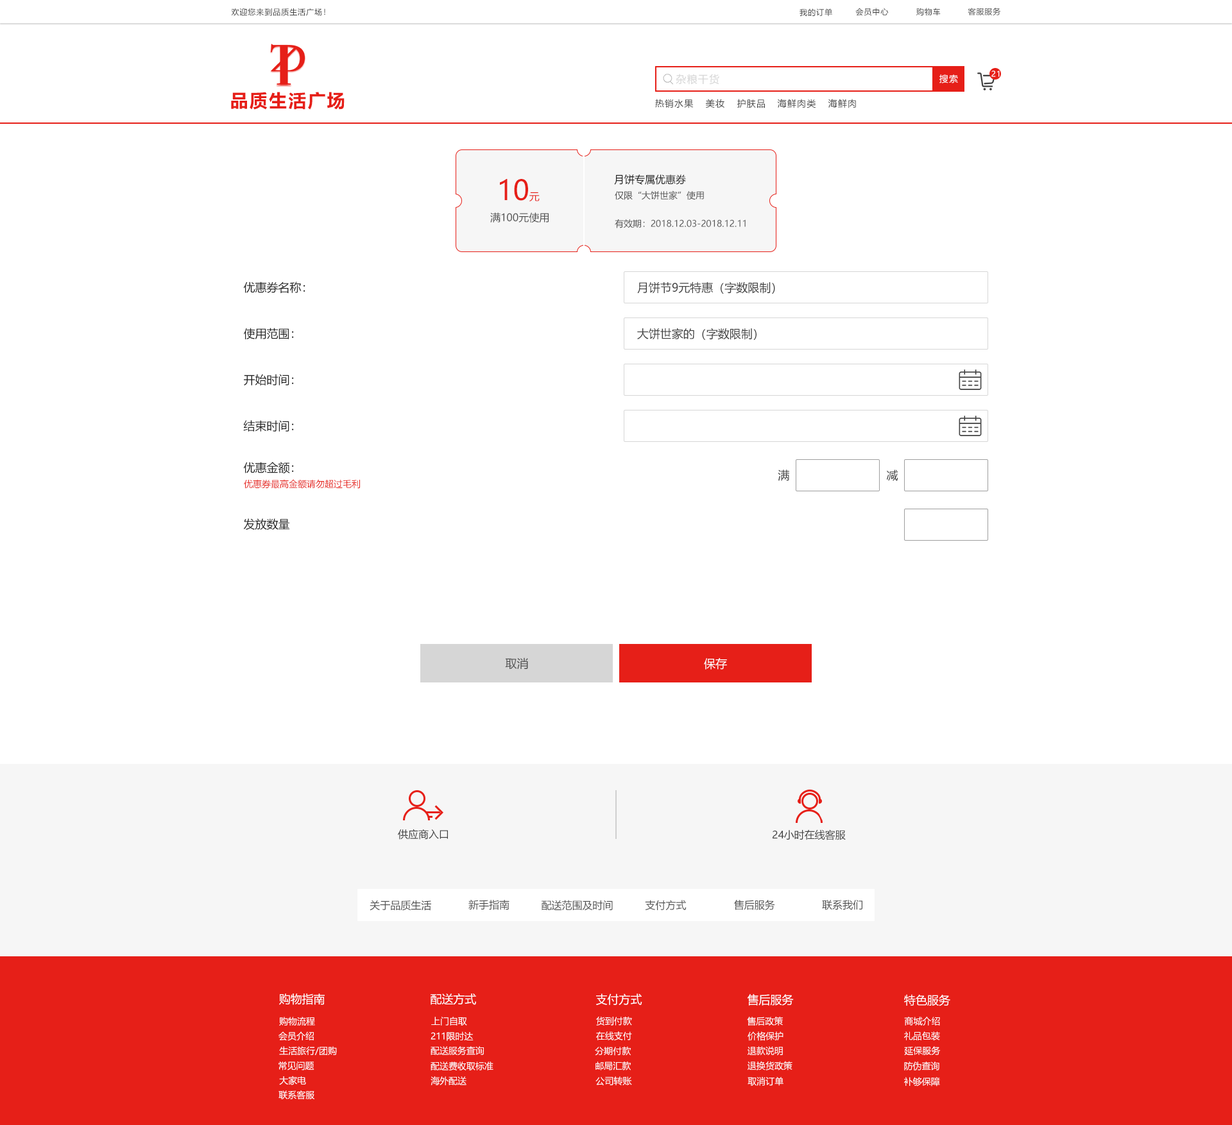
<style>
.page{position:relative;width:1232px;height:1125px;background:#ffffff}
.page>*{position:absolute;margin:0}
.t1{font:7.7px "MicrosoftYaHei";letter-spacing:0.08em;color:#404040}
.t2{font:10.3px "MicrosoftYaHei";letter-spacing:0.08em;color:#d6d6d6}
.t3{font:9px "MicrosoftYaHei";letter-spacing:0.08em;color:#ffffff}
.t4{font:7.7px "MicrosoftYaHei";letter-spacing:0.08em;color:#ffffff}
.t5{font:18px "MicrosoftYaHei-Bold";letter-spacing:0.08em;color:#e61f18}
.t6{font:9px "MicrosoftYaHei";letter-spacing:0.08em;color:#404040}
.t7{font:27.6px "MicrosoftYaHei";color:#e61f18}
.t8{font:10.3px "MicrosoftYaHei";color:#e61f18}
.t9{font:10.3px "MicrosoftYaHei";color:#202020}
.t10{font:9px "MicrosoftYaHei";color:#505050}
.t11{font:10.3px "MicrosoftYaHei";color:#505050}
.t12{font:11.5px "MicrosoftYaHei";color:#202020}
.t13{font:11.5px "MicrosoftYaHei";color:#404040}
.t14{font:9px "MicrosoftYaHei";color:#e61f18}
.t15{font:11.5px "MicrosoftYaHei";color:#505050}
.t16{font:11.5px "MicrosoftYaHei";color:#ffffff}
.t17{font:10.3px "MicrosoftYaHei";color:#404040}
.t18{font:9px "MicrosoftYaHei";color:#ffffff}
</style>
<div class="page">
<p class="t1" style="left:231px;top:8px;width:94px;height:8px">欢迎您来到品质生活广场！</p>
<p class="t1" style="left:799px;top:8px;width:33px;height:8px">我的订单</p>
<p class="t1" style="left:855px;top:8px;width:34px;height:8px">会员中心</p>
<p class="t1" style="left:916px;top:8px;width:25px;height:8px">购物车</p>
<p class="t1" style="left:968px;top:8px;width:33px;height:7px">客服服务</p>
<p class="t2" style="left:676px;top:74px;width:43px;height:11px">杂粮干货</p>
<p class="t3" style="left:939px;top:74px;width:19px;height:9px">搜索</p>
<p class="t4" style="left:991px;top:71px;width:9px;height:6px">21</p>
<p class="t5" style="left:231px;top:92px;width:114px;height:18px">品质生活广场</p>
<p class="t6" style="left:655px;top:99px;width:39px;height:9px">热销水果</p>
<p class="t6" style="left:706px;top:99px;width:18px;height:9px">美妆</p>
<p class="t6" style="left:737px;top:99px;width:28px;height:9px">护肤品</p>
<p class="t6" style="left:777px;top:99px;width:39px;height:9px">海鲜肉类</p>
<p class="t6" style="left:828px;top:99px;width:28px;height:9px">海鲜肉</p>
<p class="t7" style="left:500px;top:179px;width:40px;height:22px">10<span class="t8">元</span></p>
<p class="t9" style="left:614px;top:175px;width:72px;height:10px">月饼专属优惠券</p>
<p class="t10" style="left:615px;top:191px;width:89px;height:9px">仅限“大饼世家”使用</p>
<p class="t11" style="left:490px;top:212px;width:59px;height:11px">满100元使用</p>
<p class="t10" style="left:615px;top:219px;width:131px;height:9px">有效期：2018.12.03-2018.12.11</p>
<p class="t12" style="left:243px;top:282px;width:62px;height:11px">优惠券名称：</p>
<p class="t13" style="left:637px;top:282px;width:138px;height:12px">月饼节9元特惠（字数限制）</p>
<p class="t12" style="left:244px;top:328px;width:50px;height:11px">使用范围：</p>
<p class="t13" style="left:637px;top:328px;width:119px;height:12px">大饼世家的（字数限制）</p>
<p class="t12" style="left:244px;top:374px;width:50px;height:12px">开始时间：</p>
<p class="t12" style="left:243px;top:420px;width:51px;height:12px">结束时间：</p>
<p class="t12" style="left:243px;top:462px;width:51px;height:12px">优惠金额：</p>
<p class="t13" style="left:778px;top:470px;width:11px;height:11px">满</p>
<p class="t13" style="left:886px;top:470px;width:12px;height:11px">减</p>
<p class="t14" style="left:244px;top:479px;width:116px;height:10px">优惠券最高金额请勿超过毛利</p>
<p class="t12" style="left:243px;top:518px;width:47px;height:12px">发放数量</p>
<p class="t15" style="left:505px;top:658px;width:23px;height:11px">取消</p>
<p class="t16" style="left:704px;top:658px;width:23px;height:12px">保存</p>
<p class="t17" style="left:398px;top:829px;width:50px;height:11px">供应商入口</p>
<p class="t17" style="left:772px;top:830px;width:74px;height:11px">24小时在线客服</p>
<p class="t11" style="left:370px;top:900px;width:61px;height:11px">关于品质生活</p>
<p class="t11" style="left:468px;top:900px;width:41px;height:10px">新手指南</p>
<p class="t11" style="left:542px;top:900px;width:71px;height:11px">配送范围及时间</p>
<p class="t11" style="left:645px;top:900px;width:42px;height:10px">支付方式</p>
<p class="t11" style="left:734px;top:900px;width:41px;height:10px">售后服务</p>
<p class="t11" style="left:822px;top:900px;width:40px;height:10px">联系我们</p>
<p class="t16" style="left:279px;top:994px;width:46px;height:11px">购物指南</p>
<p class="t16" style="left:431px;top:994px;width:45px;height:11px">配送方式</p>
<p class="t16" style="left:596px;top:994px;width:46px;height:11px">支付方式</p>
<p class="t16" style="left:747px;top:994px;width:47px;height:12px">售后服务</p>
<p class="t16" style="left:904px;top:994px;width:46px;height:13px">特色服务</p>
<p class="t18" style="left:279px;top:1017px;width:36px;height:9px">购物流程</p>
<p class="t18" style="left:431px;top:1017px;width:36px;height:9px">上门自取</p>
<p class="t18" style="left:596px;top:1017px;width:36px;height:9px">货到付款</p>
<p class="t18" style="left:747px;top:1017px;width:36px;height:9px">售后政策</p>
<p class="t18" style="left:904px;top:1017px;width:36px;height:9px">商城介绍</p>
<p class="t18" style="left:278px;top:1032px;width:36px;height:9px">会员介绍</p>
<p class="t18" style="left:431px;top:1032px;width:43px;height:9px">211限时达</p>
<p class="t18" style="left:596px;top:1032px;width:36px;height:9px">在线支付</p>
<p class="t18" style="left:747px;top:1032px;width:36px;height:9px">价格保护</p>
<p class="t18" style="left:904px;top:1032px;width:36px;height:9px">礼品包装</p>
<p class="t18" style="left:279px;top:1046px;width:58px;height:9px">生活旅行/团购</p>
<p class="t18" style="left:431px;top:1046px;width:53px;height:9px">配送服务查询</p>
<p class="t18" style="left:595px;top:1046px;width:36px;height:10px">分期付款</p>
<p class="t18" style="left:747px;top:1046px;width:36px;height:10px">退款说明</p>
<p class="t18" style="left:904px;top:1046px;width:37px;height:9px">延保服务</p>
<p class="t18" style="left:278px;top:1062px;width:36px;height:9px">常见问题</p>
<p class="t18" style="left:431px;top:1062px;width:62px;height:9px">配送费收取标准</p>
<p class="t18" style="left:595px;top:1062px;width:36px;height:9px">邮局汇款</p>
<p class="t18" style="left:747px;top:1061px;width:45px;height:10px">退换货政策</p>
<p class="t18" style="left:904px;top:1062px;width:35px;height:9px">防伪查询</p>
<p class="t18" style="left:279px;top:1076px;width:27px;height:10px">大家电</p>
<p class="t18" style="left:431px;top:1077px;width:35px;height:9px">海外配送</p>
<p class="t18" style="left:595px;top:1077px;width:37px;height:9px">公司转账</p>
<p class="t18" style="left:747px;top:1077px;width:36px;height:9px">取消订单</p>
<p class="t18" style="left:904px;top:1077px;width:36px;height:10px">补够保障</p>
<p class="t18" style="left:278px;top:1091px;width:36px;height:9px">联系客服</p>
</div>
